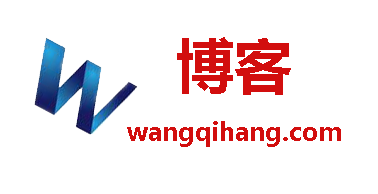
<style>
.page{position:relative;width:378px;height:194px;background:#ffffff}
.page>*{position:absolute;margin:0}
.t1{font:58.3px "MicrosoftYaHei-Bold";color:#d20e0e}
.t2{font:25px "MicrosoftYaHei-Bold";color:#d20e0e}
</style>
<div class="page">
<p class="t1" style="left:177px;top:37px;width:114px;height:58px">博客</p>
<p class="t2" style="left:127px;top:121px;width:214px;height:26px">wangqihang.com</p>
</div>
